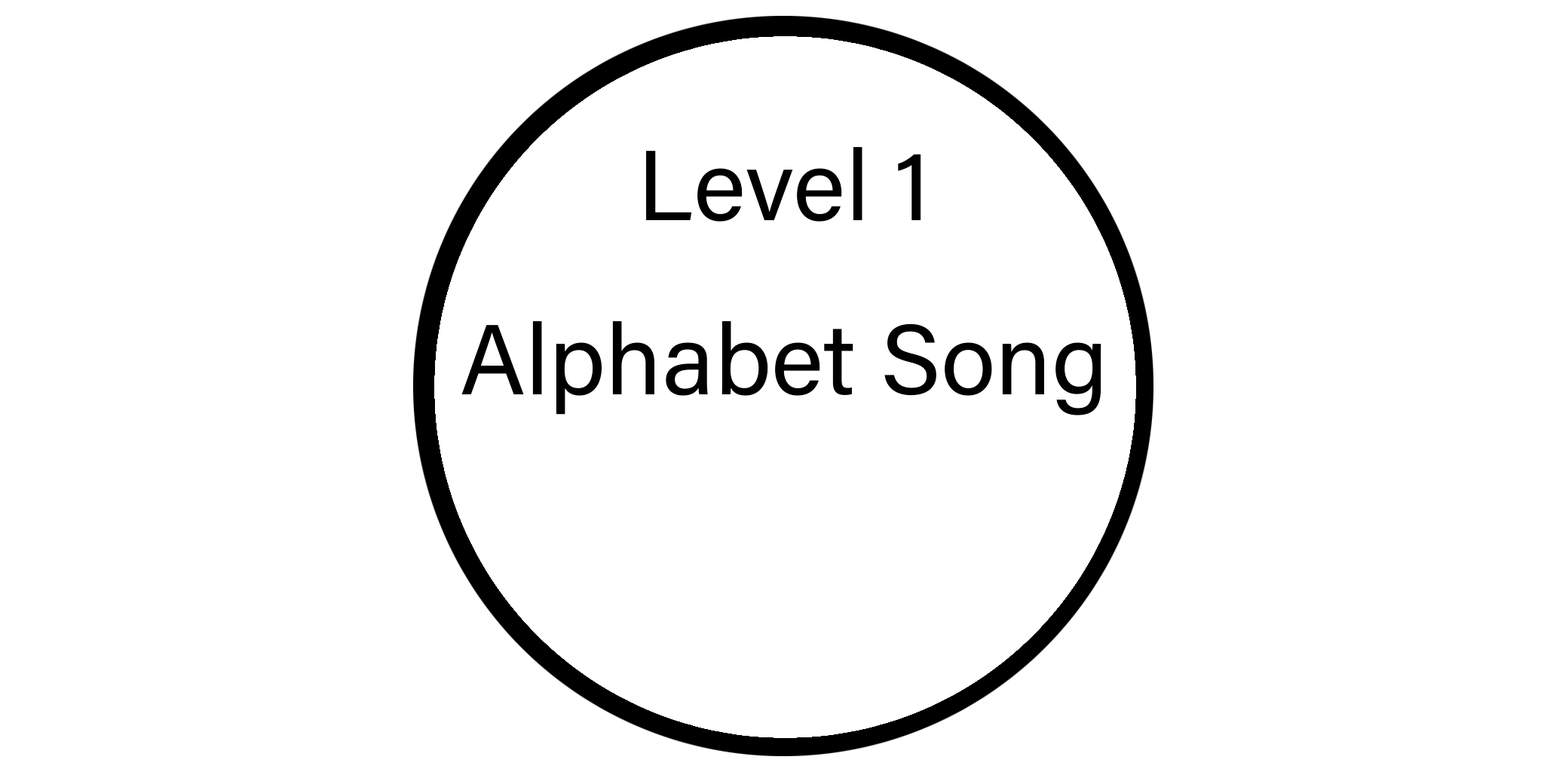
<style>
.page{position:relative;width:1544px;height:772px;background:#ffffff}
.page>*{position:absolute;margin:0}
.t1{font:99.5px "AcuminConcept-Regular";color:#000000}
</style>
<div class="page">
<p class="t1" style="left:461px;top:147px;width:641px;height:268px;text-align:center">Level 1<br>Alphabet Song</p>
</div>
